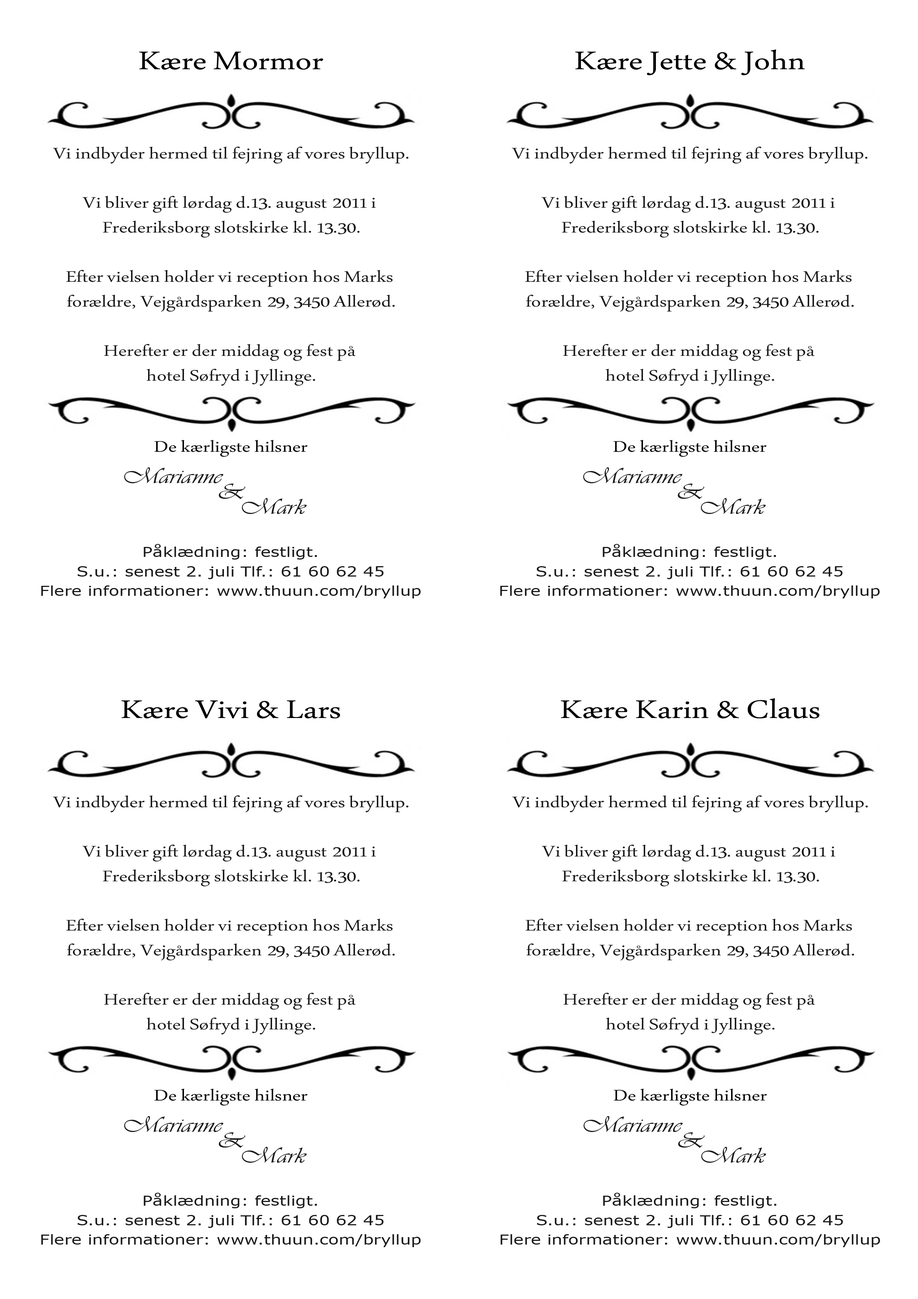
<style>
.page{position:relative;width:918px;height:1299px;background:#ffffff}
.page>*{position:absolute;margin:0}
.t1{font:37.5px "MicrosoftUighur";color:#000000;scale:1.23 1}
.t2{font:22.5px/24.7px "MicrosoftUighur";color:#191919;scale:1.23 1}
.t3{font:22.5px "MicrosoftUighur";color:#000000;scale:1.23 1}
.t4{font:22.5px/15.4px "Vivaldii";color:#191919;scale:1.23 1}
.t5{font:13.7px/19.4px "Verdana";color:#191919;scale:1.23 1}
</style>
<div class="page">
<p class="t1" style="left:139px;top:51px;width:184px;height:19px">Kære Mormor</p>
<p class="t1" style="left:575px;top:49px;width:230px;height:27px">Kære Jette &amp; John</p>
<p class="t2" style="left:53px;top:147px;width:356px;height:239px;text-align:center">Vi indbyder hermed til fejring af vores bryllup.<br><br>Vi bliver gift lørdag d.13. august 2011 i <br>Frederiksborg slotskirke kl. 13.30.<br><br>Efter vielsen holder vi reception hos Marks <br>forældre, Vejgårdsparken 29, 3450 Allerød.<br><br>Herefter er der middag og fest på <br>hotel Søfryd i Jyllinge.</p>
<p class="t2" style="left:512px;top:147px;width:356px;height:239px;text-align:center">Vi indbyder hermed til fejring af vores bryllup.<br><br>Vi bliver gift lørdag d.13. august 2011 i <br>Frederiksborg slotskirke kl. 13.30.<br><br>Efter vielsen holder vi reception hos Marks <br>forældre, Vejgårdsparken 29, 3450 Allerød.<br><br>Herefter er der middag og fest på <br>hotel Søfryd i Jyllinge.</p>
<p class="t3" style="left:154px;top:440px;width:154px;height:17px">De kærligste hilsner</p>
<p class="t3" style="left:613px;top:440px;width:154px;height:17px">De kærligste hilsner</p>
<p class="t4" style="left:124px;top:467px;width:183px;height:47px;text-align:center">Marianne                 <br> &amp; <br>            Mark</p>
<p class="t4" style="left:583px;top:467px;width:183px;height:47px;text-align:center">Marianne                 <br> &amp; <br>            Mark</p>
<p class="t5" style="left:41px;top:544px;width:380px;height:54px;text-align:center">Påklædning: festligt.<br>S.u.: senest 2. juli Tlf.: 61 60 62 45<br>Flere informationer: www.thuun.com/bryllup</p>
<p class="t5" style="left:500px;top:544px;width:380px;height:54px;text-align:center">Påklædning: festligt.<br>S.u.: senest 2. juli Tlf.: 61 60 62 45<br>Flere informationer: www.thuun.com/bryllup</p>
<p class="t1" style="left:121px;top:700px;width:219px;height:19px">Kære Vivi &amp; Lars</p>
<p class="t1" style="left:561px;top:698px;width:259px;height:21px">Kære Karin &amp; Claus</p>
<p class="t2" style="left:53px;top:795px;width:356px;height:239px;text-align:center">Vi indbyder hermed til fejring af vores bryllup.<br><br>Vi bliver gift lørdag d.13. august 2011 i <br>Frederiksborg slotskirke kl. 13.30.<br><br>Efter vielsen holder vi reception hos Marks <br>forældre, Vejgårdsparken 29, 3450 Allerød.<br><br>Herefter er der middag og fest på <br>hotel Søfryd i Jyllinge.</p>
<p class="t2" style="left:512px;top:795px;width:356px;height:239px;text-align:center">Vi indbyder hermed til fejring af vores bryllup.<br><br>Vi bliver gift lørdag d.13. august 2011 i <br>Frederiksborg slotskirke kl. 13.30.<br><br>Efter vielsen holder vi reception hos Marks <br>forældre, Vejgårdsparken 29, 3450 Allerød.<br><br>Herefter er der middag og fest på <br>hotel Søfryd i Jyllinge.</p>
<p class="t3" style="left:154px;top:1088px;width:154px;height:17px">De kærligste hilsner</p>
<p class="t3" style="left:614px;top:1088px;width:153px;height:17px">De kærligste hilsner</p>
<p class="t4" style="left:124px;top:1116px;width:183px;height:47px;text-align:center">Marianne                 <br> &amp; <br>            Mark</p>
<p class="t4" style="left:583px;top:1116px;width:183px;height:47px;text-align:center">Marianne                 <br> &amp; <br>            Mark</p>
<p class="t5" style="left:41px;top:1192px;width:380px;height:55px;text-align:center">Påklædning: festligt.<br>S.u.: senest 2. juli Tlf.: 61 60 62 45<br>Flere informationer: www.thuun.com/bryllup</p>
<p class="t5" style="left:501px;top:1192px;width:379px;height:55px;text-align:center">Påklædning: festligt.<br>S.u.: senest 2. juli Tlf.: 61 60 62 45<br>Flere informationer: www.thuun.com/bryllup</p>
</div>
